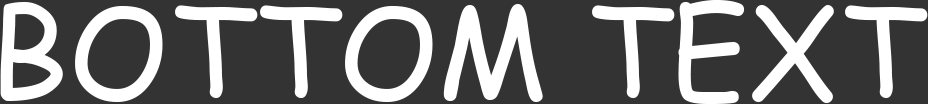
<style>
.page{position:relative;width:928px;height:104px;background:#333333}
.page>*{position:absolute;margin:0}
.t1{font:125px "ComicSansMS";color:#ffffff}
</style>
<div class="page">
<p class="t1" style="left:0px;top:0px;width:928px;height:104px">BOTTOM TEXT</p>
</div>
